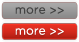
<style>
.page{position:relative;width:79px;height:42px}
.page>*{position:absolute;margin:0}
.t1{font:11.9px "GothamBook";color:#444444}
.t2{font:11.9px "GothamBook";color:#ffffff}
</style>
<div class="page">
<p class="t1" style="left:15px;top:7px;width:49px;height:7px">more &gt;&gt;</p>
<p class="t2" style="left:15px;top:28px;width:49px;height:7px">more &gt;&gt;</p>
</div>
